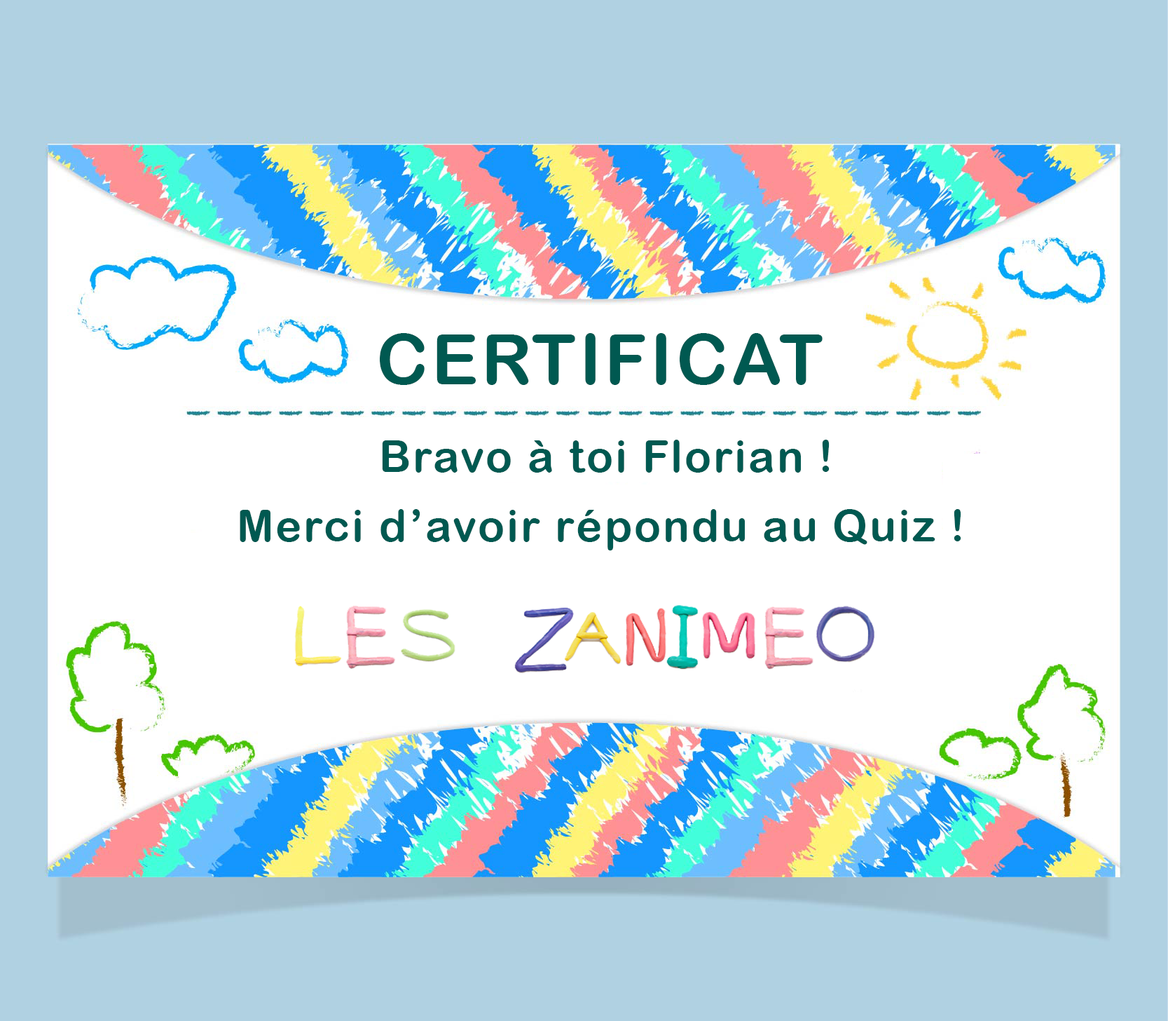
<style>
.page{position:relative;width:1168px;height:1021px;background:#ffffff}
.page>*{position:absolute;margin:0}
.t1{font:70.1px "ArialRoundedMTBold";letter-spacing:0.05em;color:#005951}
.t2{font:43.8px "ArialRoundedMTBold";letter-spacing:0.05em;color:#005951}
</style>
<div class="page">
<p class="t1" style="left:380px;top:333px;width:443px;height:52px">CERTIFICAT</p>
<p class="t2" style="left:382px;top:439px;width:448px;height:33px">Bravo à toi Florian !</p>
<p class="t2" style="left:240px;top:509px;width:722px;height:41px">Merci d’avoir répondu au Quiz !</p>
</div>
